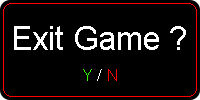
<style>
.page{position:relative;width:200px;height:100px;background:#000000}
.page>*{position:absolute;margin:0}
.t1{font:33.3px "ArialMT";color:#ffffff}
.t2{font:16.7px "ArialMT"}
</style>
<div class="page">
<p class="t1" style="left:14px;top:26px;width:172px;height:24px">Exit Game ?</p>
<p class="t2" style="left:83px;top:69px;width:34px;height:12px">Y / N</p>
</div>
